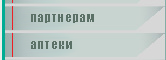
<style>
.page{position:relative;width:166px;height:60px;background:#c8d4d0}
.page>*{position:absolute;margin:0}
.t1{font:12px "Impact";letter-spacing:0.1em;color:#5b7066}
</style>
<div class="page">
<p class="t1" style="left:31px;top:14px;width:63px;height:9px">партнерам</p>
<p class="t1" style="left:31px;top:41px;width:41px;height:8px">аптеки</p>
</div>
